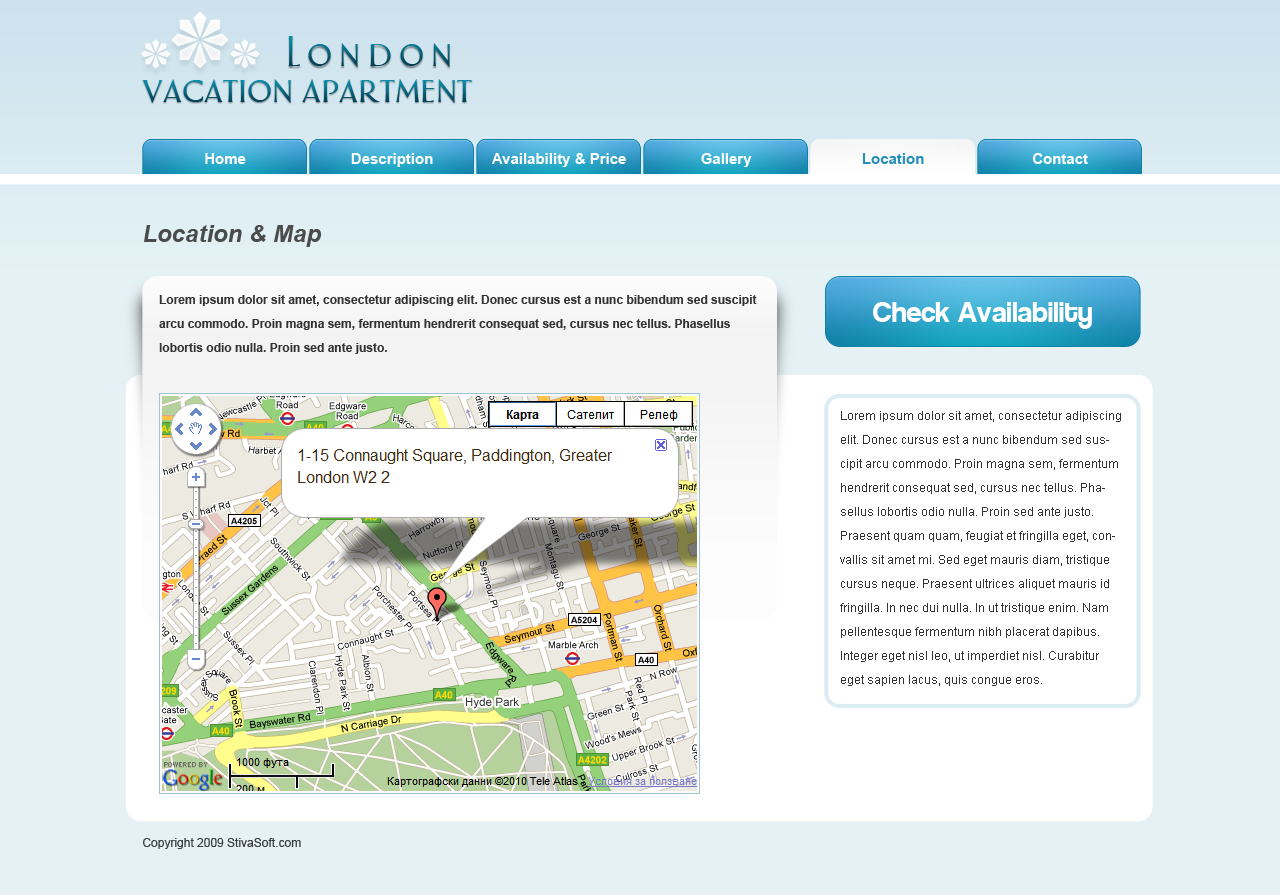
<style>
.page{position:relative;width:1280px;height:895px;background:#ffffff}
.page>*{position:absolute;margin:0}
.t1{font:36px "AphasiaBT-Roman";letter-spacing:0.2em}
.t2{font:36px "AphasiaBT-Roman"}
.t3{font:15px "Arial-BoldMT";color:#ffffff}
.t4{font:15px "Arial-BoldMT";color:#2690ba}
.t5{font:24px "Arial-BoldItalicMT";color:#4a4c4c}
.t6{font:12px/24px "Arial-BoldMT";color:#323232}
.t7{font:28px "Coolvetica";color:#ffffff}
.t8{font:12px/24px "ArialMT";color:#323232}
.t9{font:12px "ArialMT";color:#393d3d}
</style>
<div class="page">
<p class="t1" style="left:288px;top:36px;width:162px;height:31px">London</p>
<p class="t2" style="left:142px;top:79px;width:330px;height:24px">vacation apartment</p>
<p class="t3" style="left:205px;top:153px;width:41px;height:11px">Home</p>
<p class="t3" style="left:351px;top:153px;width:82px;height:14px">Description</p>
<p class="t3" style="left:491px;top:153px;width:135px;height:14px">Availability &amp; Price</p>
<p class="t3" style="left:701px;top:153px;width:51px;height:14px">Gallery</p>
<p class="t4" style="left:862px;top:153px;width:62px;height:11px">Location</p>
<p class="t3" style="left:1032px;top:153px;width:56px;height:11px">Contact</p>
<p class="t5" style="left:144px;top:225px;width:177px;height:22px">Location &amp; Map</p>
<p class="t6" style="left:159px;top:295px;width:598px;height:59px">Lorem ipsum dolor sit amet, consectetur adipiscing elit. Donec cursus est a nunc bibendum sed suscipit arcu commodo. Proin magna sem, fermentum hendrerit consequat sed, cursus nec tellus. Phasellus lobortis odio nulla. Proin sed ante justo.</p>
<p class="t7" style="left:873px;top:302px;width:219px;height:27px">Check Availability</p>
<p class="t8" style="left:840px;top:411px;width:281px;height:275px">Lorem ipsum dolor sit amet, consectetur adipiscing elit. Donec cursus est a nunc bibendum sed suscipit arcu commodo. Proin magna sem, fermentum hendrerit consequat sed, cursus nec tellus. Phasellus lobortis odio nulla. Proin sed ante justo. Praesent quam quam, feugiat et fringilla eget, convallis sit amet mi. Sed eget mauris diam, tristique cursus neque. Praesent ultrices aliquet mauris id fringilla. In nec dui nulla. In ut tristique enim. Nam pellentesque fermentum nibh placerat dapibus. Integer eget nisl leo, ut imperdiet nisl. Curabitur eget sapien lacus, quis congue eros.</p>
<p class="t9" style="left:143px;top:838px;width:158px;height:11px">Copyright 2009 StivaSoft.com</p>
</div>
